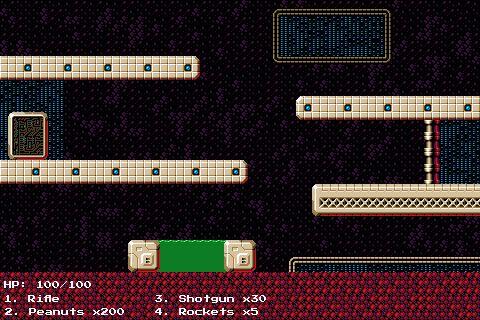
<style>
.page{position:relative;width:480px;height:320px;background:#000000}
.page>*{position:absolute;margin:0}
.t1{font:8px "PressStart2P-Regular";color:#ffffff}
</style>
<div class="page">
<p class="t1" style="left:4px;top:281px;width:87px;height:7px">HP: 100/100</p>
<p class="t1" style="left:5px;top:295px;width:54px;height:7px">1. Rifle</p>
<p class="t1" style="left:155px;top:295px;width:111px;height:8px">3. Shotgun x30</p>
<p class="t1" style="left:5px;top:308px;width:119px;height:7px">2. Peanuts x200</p>
<p class="t1" style="left:155px;top:308px;width:103px;height:7px">4. Rockets x5</p>
</div>
